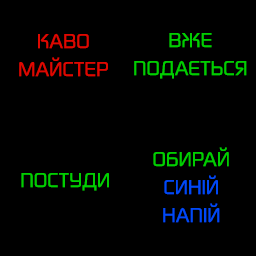
<style>
.page{position:relative;width:256px;height:256px;background:#000000}
.page>*{position:absolute;margin:0}
.t1{font:20.9px/28px "DigitalSansNowMLPro-Reg";letter-spacing:-0.025em;color:#de0800}
.t2{font:20.9px/28px "DigitalSansNowMLPro-Reg";letter-spacing:-0.025em;color:#00ce00}
.t3{font:20.9px/28px "DigitalSansNowMLPro-Reg";letter-spacing:-0.025em;color:#0049f7}
.t4{font:20.9px "DigitalSansNowMLPro-Reg";letter-spacing:-0.025em;color:#00ce00}
</style>
<div class="page">
<p class="t1" style="left:19px;top:33px;width:89px;height:44px;text-align:center">КАВО<br>МАЙСТЕР</p>
<p class="t2" style="left:134px;top:33px;width:113px;height:46px;text-align:center">ВЖЕ<br>ПОДАЄТЬСЯ</p>
<p class="t3" style="left:153px;top:147px;width:76px;height:76px;text-align:center"><span class="t2">ОБИРАЙ<br></span>СИНІЙ<br>НАПІЙ</p>
<p class="t4" style="left:21px;top:173px;width:88px;height:18px">ПОСТУДИ</p>
</div>
